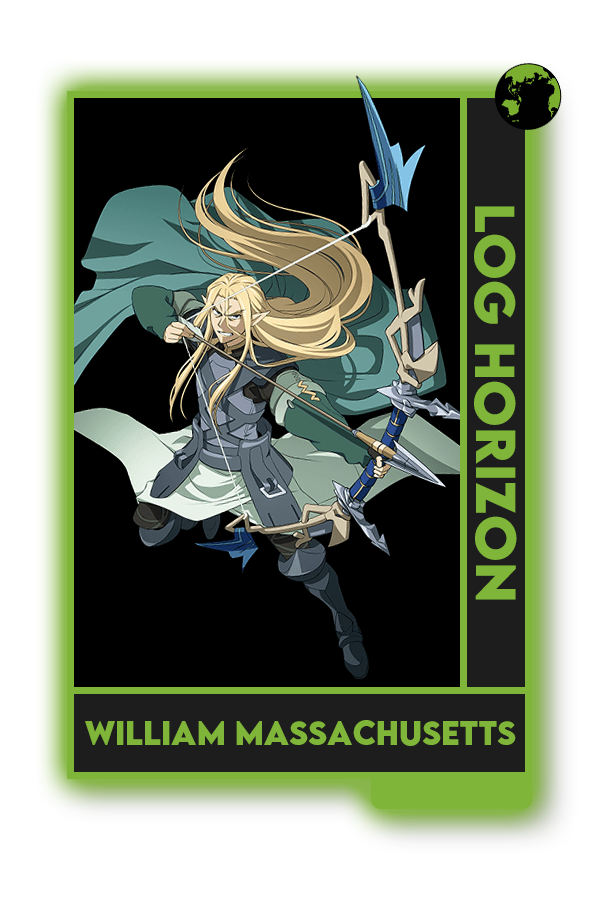
<style>
.page{position:relative;width:600px;height:900px;background:#000000}
.page>*{position:absolute;margin:0}
.t1{font:50px "LEMONMILK-Bold";color:#7fad41}
.t2{font:29.7px "LEMONMILK-Bold";color:#7fad41}
</style>
<div class="page">
<p class="t1" style="left:474px;top:206px;width:43px;height:394px;rotate:90deg">Log Horizon</p>
<p class="t2" style="left:85px;top:720px;width:431px;height:26px">William Massachusetts</p>
</div>
